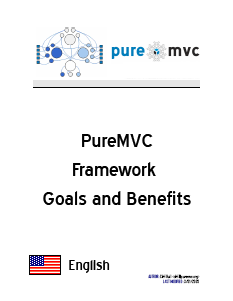
<style>
.page{position:relative;width:233px;height:301px;background:#ffffff}
.page>*{position:absolute;margin:0}
.t1{font:24px "BlueHighway";color:#010101}
.t2{font:18px "BlueHighway";color:#010101}
</style>
<div class="page">
<p class="t1" style="left:43px;top:134px;width:148px;height:71px;text-align:center">PureMVC<br>Framework <br>Goals and Benefits</p>
<p class="t2" style="left:69px;top:260px;width:41px;height:13px">English</p>
</div>
